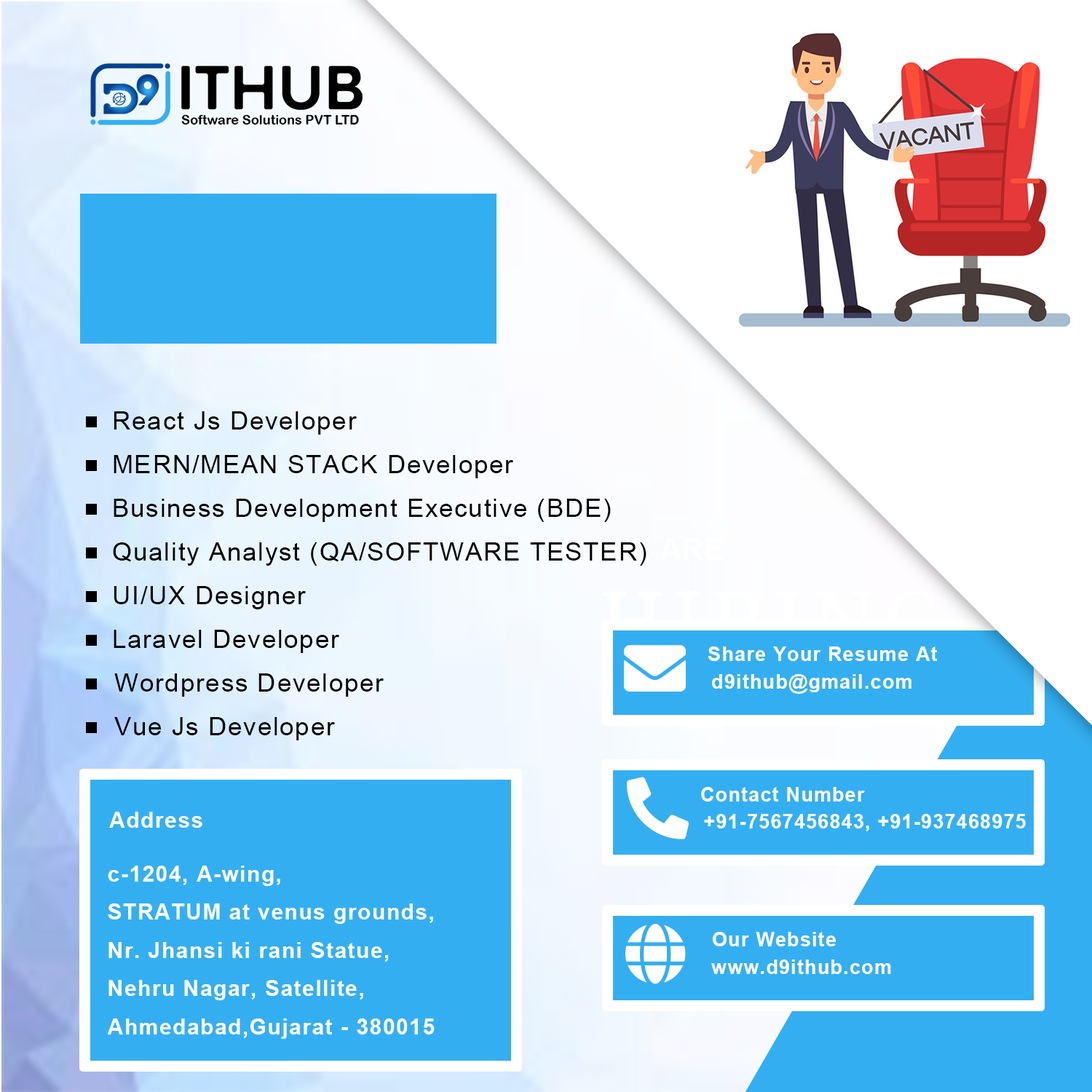
<style>
.page{position:relative;width:1092px;height:1092px;background:#33aff1}
.page>*{position:absolute;margin:0}
.t1{font:25.5px "ArialMT";letter-spacing:0.05em;color:#000000}
.t2{font:19.5px "Arial-BoldMT";letter-spacing:0.05em;color:#ffffff}
.t3{font:21.8px "Arial-BoldMT";letter-spacing:0.05em;color:#ffffff}
</style>
<div class="page">
<p class="t1" style="left:114px;top:411px;width:243px;height:24px">React Js Developer</p>
<p class="t1" style="left:114px;top:455px;width:400px;height:23px">MERN/MEAN STACK Developer</p>
<p class="t1" style="left:114px;top:499px;width:497px;height:23px">Business Development Executive (BDE)</p>
<p class="t1" style="left:113px;top:542px;width:533px;height:24px">Quality Analyst (QA/SOFTWARE TESTER)</p>
<p class="t1" style="left:114px;top:586px;width:192px;height:23px">UI/UX Designer</p>
<p class="t1" style="left:114px;top:630px;width:226px;height:23px">Laravel Developer</p>
<p class="t2" style="left:708px;top:646px;width:230px;height:15px">Share Your Resume At</p>
<p class="t1" style="left:114px;top:673px;width:270px;height:24px">Wordpress Developer</p>
<p class="t2" style="left:712px;top:674px;width:199px;height:20px">d9ithub@gmail.com</p>
<p class="t1" style="left:114px;top:717px;width:222px;height:23px">Vue Js Developer</p>
<p class="t2" style="left:701px;top:787px;width:164px;height:15px">Contact Number</p>
<p class="t3" style="left:109px;top:812px;width:93px;height:16px">Address</p>
<p class="t2" style="left:704px;top:814px;width:322px;height:17px">+91-7567456843, +91-937468975</p>
<p class="t3" style="left:107px;top:866px;width:328px;height:173px">c-1204, A-wing, <br>STRATUM at venus grounds, <br>Nr. Jhansi ki rani Statue,<br>Nehru Nagar, Satellite, <br>Ahmedabad,Gujarat - 380015</p>
<p class="t2" style="left:713px;top:932px;width:123px;height:14px">Our Website</p>
<p class="t2" style="left:711px;top:959px;width:180px;height:15px">www.d9ithub.com</p>
</div>
